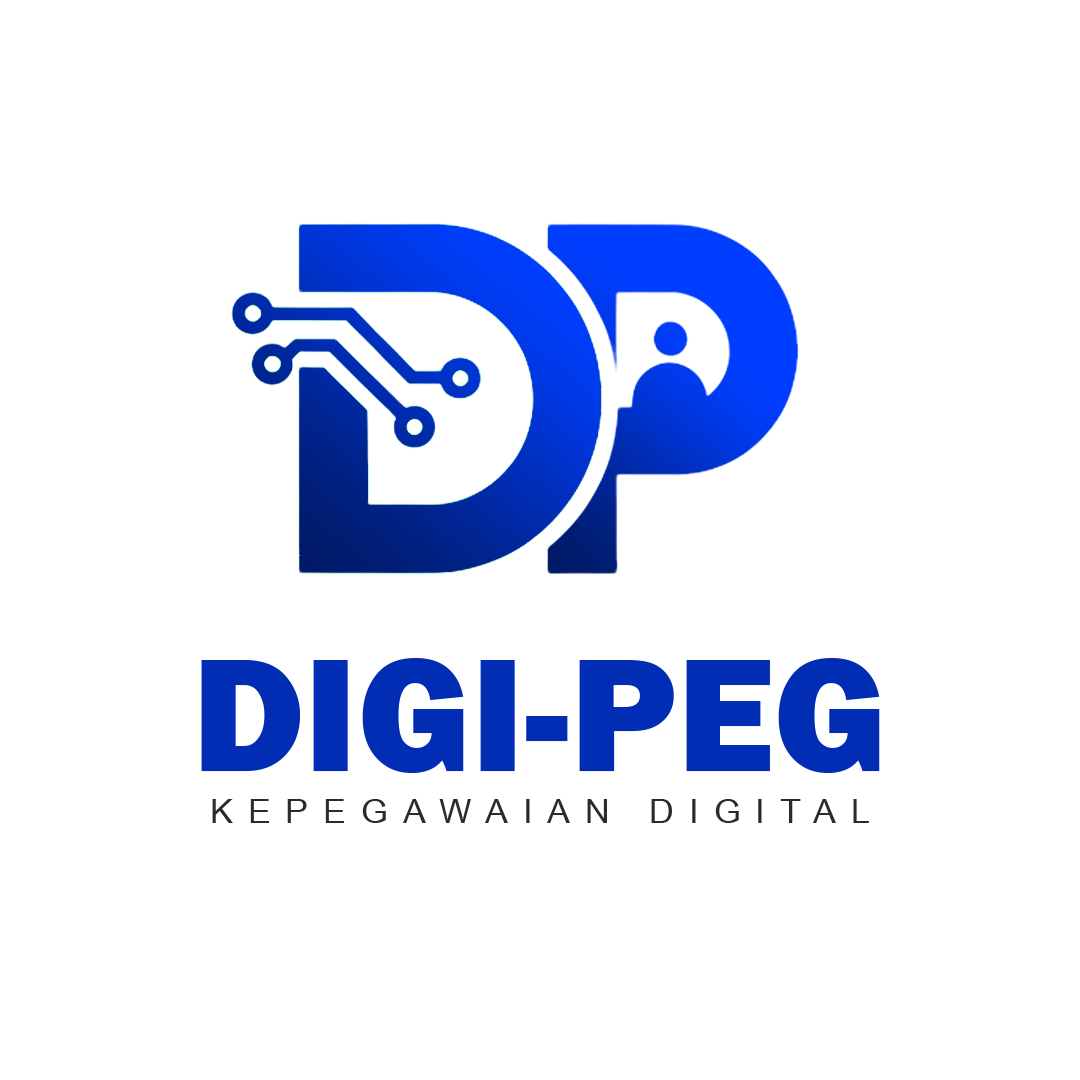
<style>
.page{position:relative;width:1080px;height:1080px;background:#ffffff}
.page>*{position:absolute;margin:0}
.t1{font:166px "FranklinGothic-Heavy";color:#002db3}
.t2{font:33.3px "ArialNarrow";letter-spacing:0.36em;color:#2b2b2b;scale:1.25 1}
</style>
<div class="page">
<p class="t1" style="left:201px;top:658px;width:679px;height:115px">DIGI-PEG</p>
<p class="t2" style="left:212px;top:799px;width:657px;height:24px">KEPEGAWAIAN DIGITAL</p>
</div>
